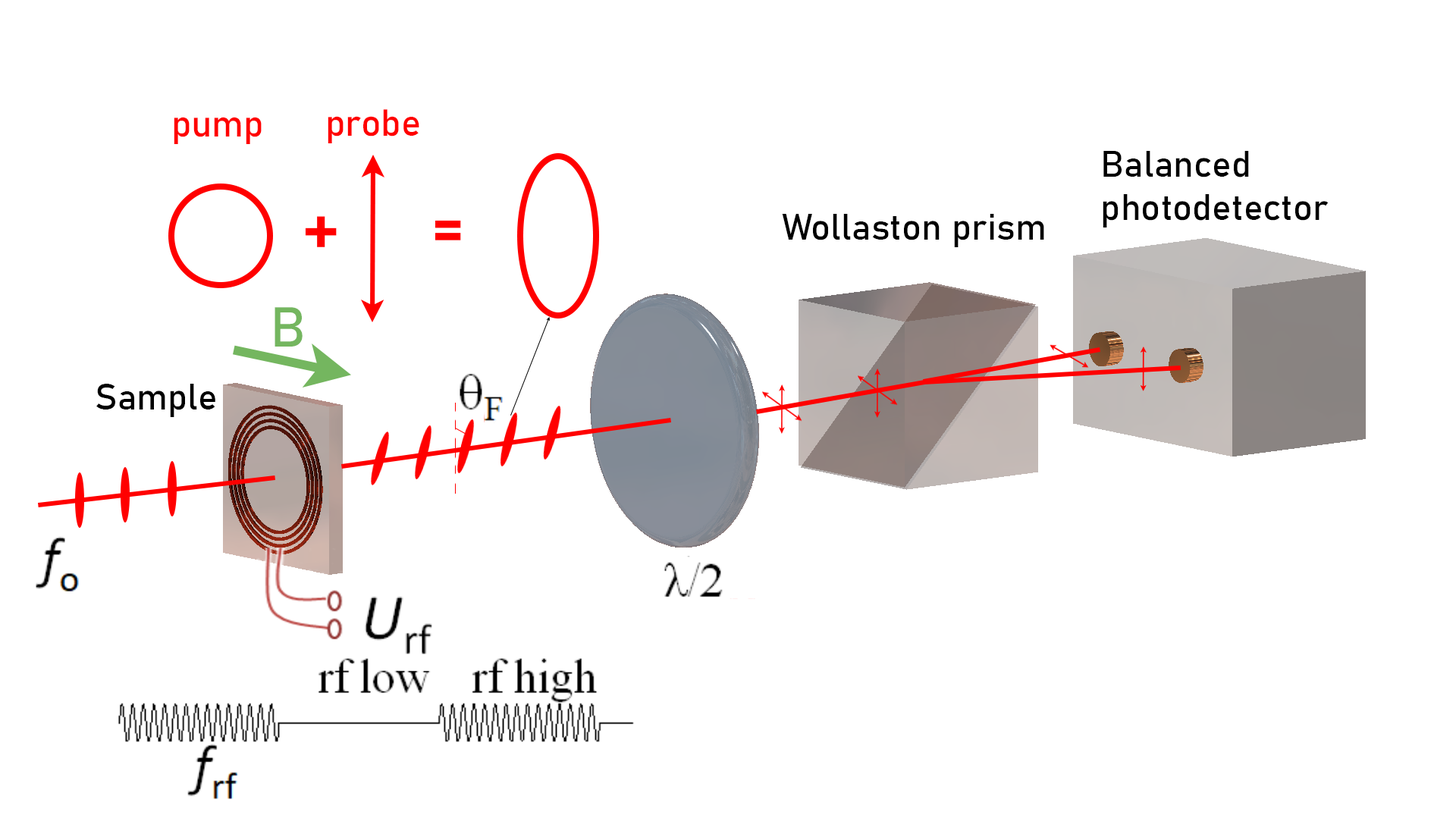
<style>
.page{position:relative;width:1456px;height:819px;background:#ffffff}
.page>*{position:absolute;margin:0}
.t1{font:37.2px "Bahnschrift";color:#ff0000}
.t2{font:36.4px "Bahnschrift";color:#000000}
.t3{font:77.3px "Bahnschrift";color:#ff0000}
.t4{font:55.4px "Bahnschrift";color:#74b65f}
</style>
<div class="page">
<p class="t1" style="left:328px;top:109px;width:91px;height:34px">probe</p>
<p class="t1" style="left:174px;top:117px;width:88px;height:27px">pump</p>
<p class="t2" style="left:1103px;top:151px;width:226px;height:76px">Balanced<br>photodetector</p>
<p class="t3" style="left:305px;top:216px;width:32px;height:31px">+</p>
<p class="t3" style="left:435px;top:220px;width:26px;height:20px">=</p>
<p class="t2" style="left:782px;top:214px;width:262px;height:33px">Wollaston prism</p>
<p class="t4" style="left:275px;top:307px;width:28px;height:40px">B</p>
<p class="t2" style="left:96px;top:384px;width:119px;height:33px">Sample</p>
</div>
